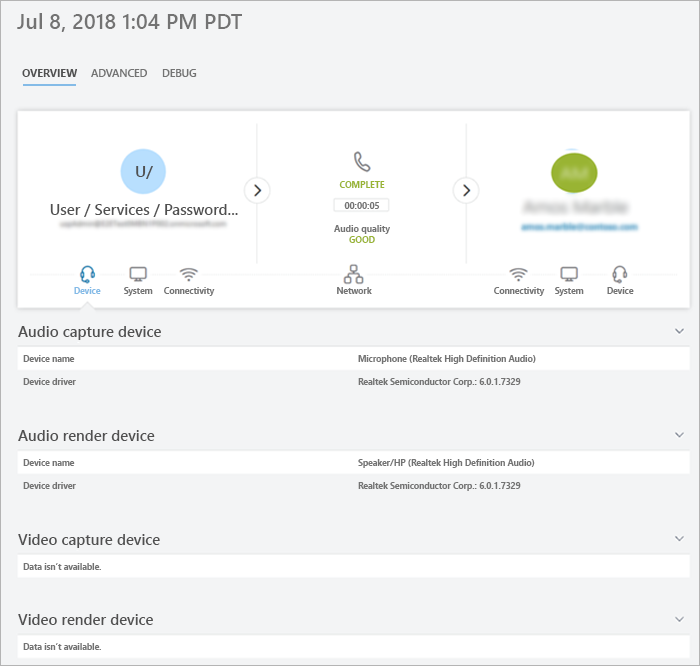
<style>
.page{position:relative;width:700px;height:666px;background:#f3f4f5}
.page>*{position:absolute;margin:0}
.t1{font:21.3px "SegoeUI-Semibold";color:#737373}
.t2{font:10.7px "SegoeUI-Bold";color:#505050}
.t3{font:10.7px "SegoeUI-Semibold";color:#737373}
.t4{font:16px "SegoeUI-Semibold";color:#505050}
.t5{font:8.8px "SegoeUI-Bold";color:#99b434}
.t6{font:14.9px "SegoeUI-Semibold";color:#505050}
.t7{font:8.8px "SegoeUI-Bold";color:#737373}
.t8{font:8.5px "SegoeUI-Bold";color:#84bbe7}
.t9{font:8.5px "SegoeUI-Bold";color:#737373}
</style>
<div class="page">
<p class="t1" style="left:17px;top:13px;width:225px;height:19px">Jul 8, 2018 1:04 PM PDT</p>
<p class="t2" style="left:22px;top:69px;width:55px;height:8px">OVERVIEW</p>
<p class="t3" style="left:91px;top:69px;width:56px;height:8px">ADVANCED</p>
<p class="t3" style="left:162px;top:69px;width:35px;height:8px">DEBUG</p>
<p class="t4" style="left:136px;top:166px;width:17px;height:13px">U/</p>
<p class="t5" style="left:339px;top:181px;width:46px;height:7px">COMPLETE</p>
<p class="t6" style="left:50px;top:204px;width:188px;height:13px">User / Services / Password...</p>
<p class="t7" style="left:344px;top:202px;width:36px;height:7px">00:00:05</p>
<p class="t7" style="left:334px;top:225px;width:56px;height:9px">Audio quality</p>
<p class="t5" style="left:349px;top:236px;width:26px;height:7px">GOOD</p>
<p class="t8" style="left:74px;top:287px;width:27px;height:7px">Device</p>
<p class="t9" style="left:124px;top:287px;width:29px;height:9px">System</p>
<p class="t9" style="left:164px;top:287px;width:51px;height:9px">Connectivity</p>
<p class="t9" style="left:337px;top:287px;width:35px;height:7px">Network</p>
<p class="t9" style="left:494px;top:287px;width:51px;height:9px">Connectivity</p>
<p class="t9" style="left:555px;top:287px;width:29px;height:9px">System</p>
<p class="t9" style="left:607px;top:287px;width:27px;height:7px">Device</p>
<p class="t6" style="left:18px;top:326px;width:143px;height:14px">Audio capture device</p>
<p class="t9" style="left:23px;top:355px;width:52px;height:7px">Device name</p>
<p class="t9" style="left:358px;top:355px;width:178px;height:9px">Microphone (Realtek High Definition Audio)</p>
<p class="t9" style="left:23px;top:378px;width:53px;height:7px">Device driver</p>
<p class="t9" style="left:358px;top:378px;width:163px;height:9px">Realtek Semiconductor Corp.: 6.0.1.7329</p>
<p class="t6" style="left:18px;top:430px;width:137px;height:11px">Audio render device</p>
<p class="t9" style="left:23px;top:459px;width:52px;height:7px">Device name</p>
<p class="t9" style="left:358px;top:459px;width:177px;height:9px">Speaker/HP (Realtek High Definition Audio)</p>
<p class="t9" style="left:23px;top:482px;width:53px;height:7px">Device driver</p>
<p class="t9" style="left:358px;top:482px;width:163px;height:9px">Realtek Semiconductor Corp.: 6.0.1.7329</p>
<p class="t6" style="left:18px;top:534px;width:142px;height:14px">Video capture device</p>
<p class="t9" style="left:23px;top:563px;width:78px;height:7px">Data isn’t available.</p>
<p class="t6" style="left:18px;top:614px;width:135px;height:11px">Video render device</p>
<p class="t9" style="left:23px;top:643px;width:78px;height:7px">Data isn’t available.</p>
</div>
